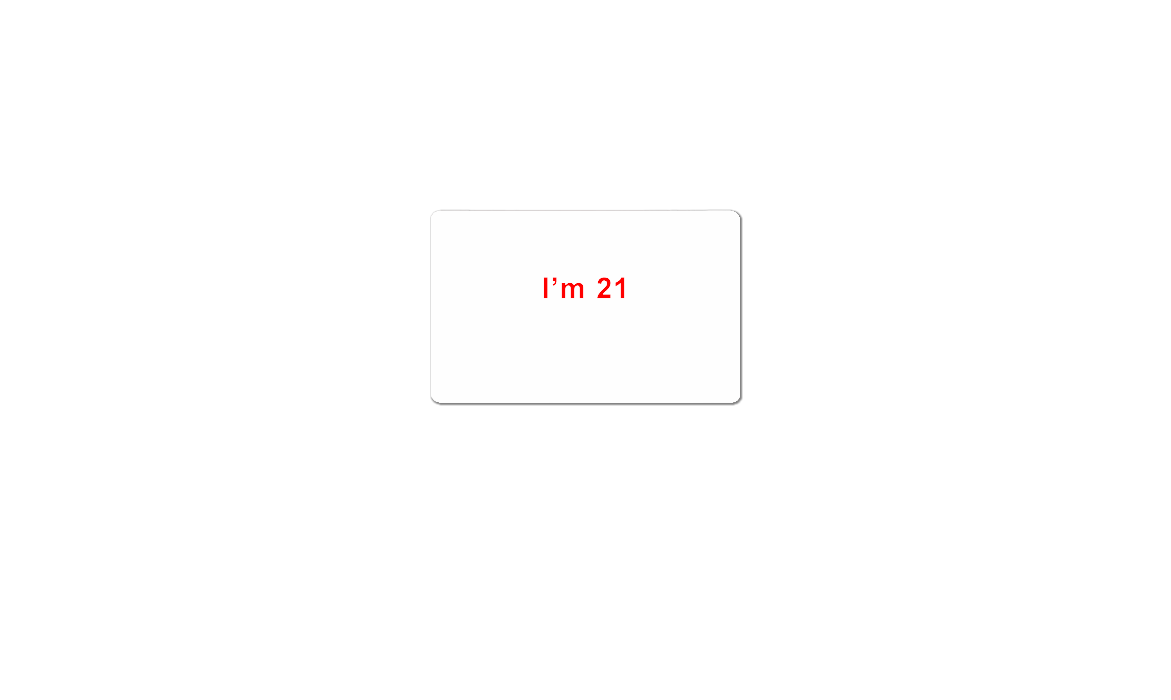
<style>
.page{position:relative;width:1171px;height:700px;background:#ffffff}
.page>*{position:absolute;margin:0}
.t1{font:29.3px "Arial-BoldMT";letter-spacing:0.03em;color:#ff0000}
</style>
<div class="page">
<p class="t1" style="left:543px;top:277px;width:82px;height:22px">I’m 21</p>
</div>
